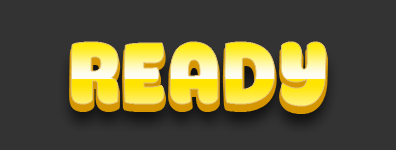
<style>
.page{position:relative;width:396px;height:150px;background:#333333}
.page>*{position:absolute;margin:0}
.t1{font:87.4px "iCielPony";letter-spacing:0.05em;scale:0.87 1}
</style>
<div class="page">
<p class="t1" style="left:71px;top:42px;width:255px;height:64px">READY</p>
</div>
